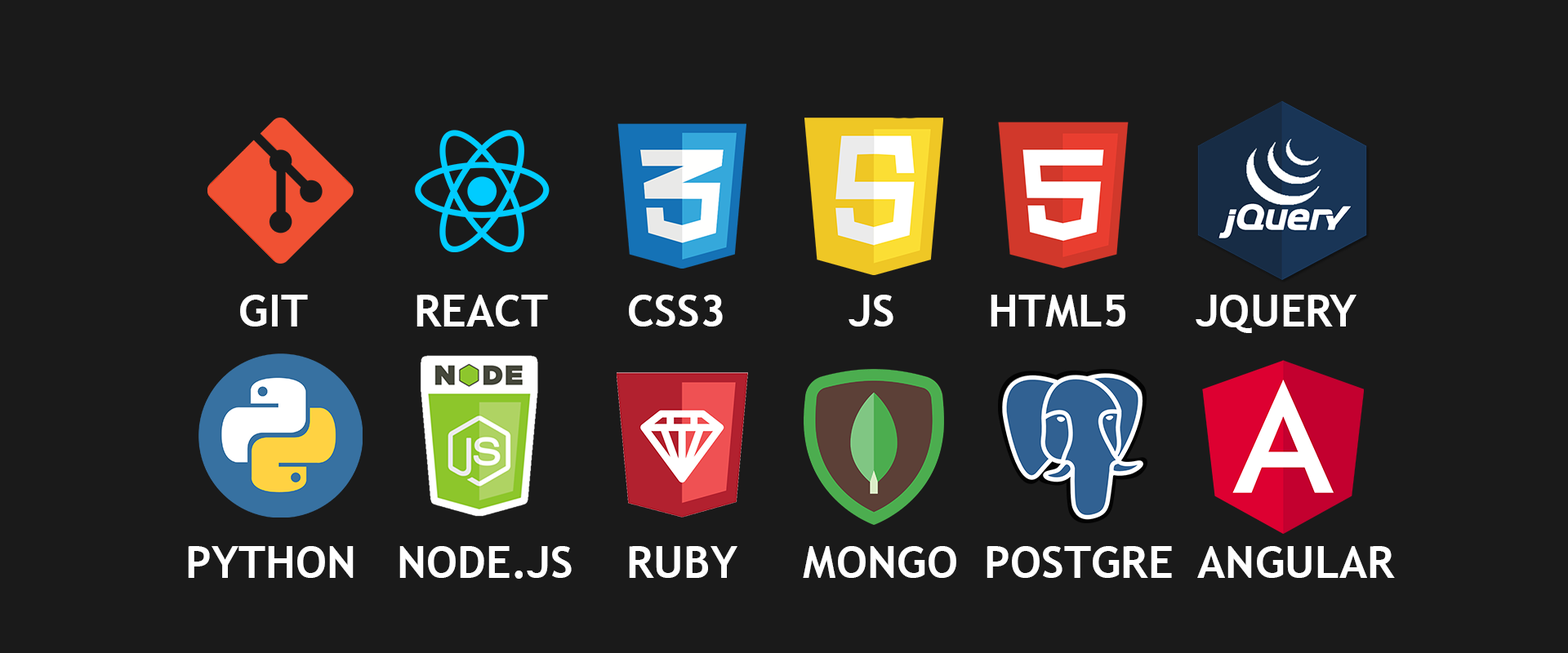
<style>
.page{position:relative;width:1568px;height:653px;background:#1a1a1a}
.page>*{position:absolute;margin:0}
.t1{font:44.3px "TrebuchetMS-Bold";color:#ffffff}
</style>
<div class="page">
<p class="t1" style="left:240px;top:295px;width:1116px;height:38px">GIT        REACT      CSS3        JS       HTML5     JQUERY</p>
<p class="t1" style="left:188px;top:546px;width:1207px;height:33px">PYTHON   NODE.JS    RUBY     MONGO  POSTGRE  ANGULAR       ANGULAR</p>
</div>
